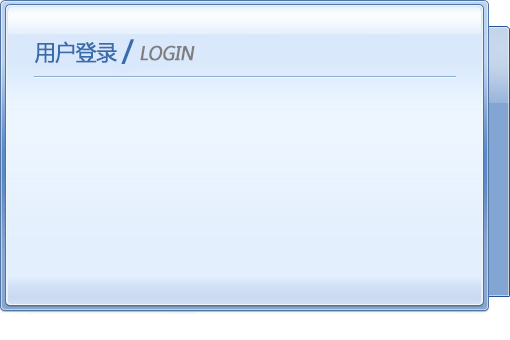
<style>
.page{position:relative;width:510px;height:340px}
.page>*{position:absolute;margin:0}
.t1{font:18.4px "MicrosoftYaHei";letter-spacing:-0.02em;color:#7e7e7e;font-weight:bold;font-style:italic;scale:0.92 1}
.t2{font:22.1px "MicrosoftYaHei";letter-spacing:-0.02em;color:#396cac;font-weight:bold;scale:0.92 1}
.t3{font:27.6px "MicrosoftYaHei";letter-spacing:-0.02em;color:#396cac;font-weight:bold;scale:0.92 1}
</style>
<div class="page">
<p class="t1" style="left:35px;top:39px;width:160px;height:25px"><span class="t2">用户登录 </span><span class="t3">/ </span>LOGIN</p>
</div>
